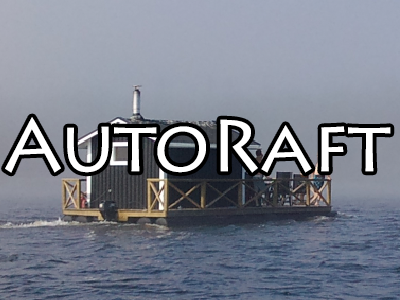
<style>
.page{position:relative;width:400px;height:300px}
.page>*{position:absolute;margin:0}
.t1{font:73px "LithosPro-Regular";color:#ffffff}
</style>
<div class="page">
<p class="t1" style="left:5px;top:117px;width:386px;height:56px">AutoRaft</p>
</div>
